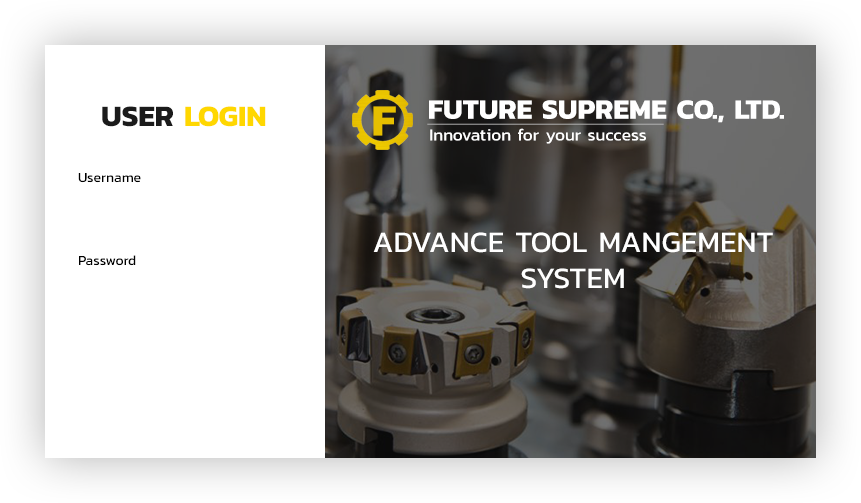
<style>
.page{position:relative;width:861px;height:503px;background:#ffffff}
.page>*{position:absolute;margin:0}
.t1{font:28.1px "Kanit-Bold";color:#ffffff;text-transform:uppercase}
.t2{font:30px "Kanit-Bold";color:#ffd700}
.t3{font:30px "Kanit-Bold";color:#1b1b1b}
.t4{font:45px "Kanit-Bold";color:#e6bf00;text-transform:uppercase}
.t5{font:16.9px "Kanit-Regular";color:#ffffff}
.t6{font:14px "Kanit-Regular";color:#000000}
.t7{font:30px "Kanit-Regular";color:#ffffff}
</style>
<div class="page">
<p class="t1" style="left:429px;top:100px;width:355px;height:23px">Future supreme co., ltd.</p>
<p class="t2" style="left:102px;top:106px;width:164px;height:21px"><span class="t3">USER </span>LOGIN</p>
<p class="t4" style="left:373px;top:106px;width:23px;height:30px">F</p>
<p class="t5" style="left:430px;top:128px;width:216px;height:16px">Innovation for your success</p>
<p class="t6" style="left:78px;top:173px;width:63px;height:10px">Username</p>
<p class="t7" style="left:373px;top:232px;width:400px;height:57px;text-align:center">ADVANCE TOOL MANGEMENT<br>SYSTEM</p>
<p class="t6" style="left:79px;top:255px;width:57px;height:11px">Password</p>
</div>
